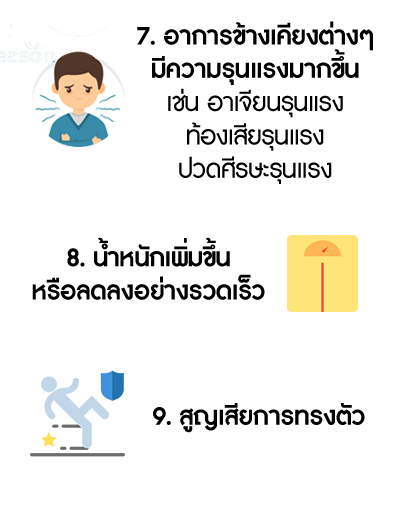
<style>
.page{position:relative;width:400px;height:507px;background:#ffffff}
.page>*{position:absolute;margin:0}
.t1{font:33.3px/33.3px "DBAdmanX";letter-spacing:-0.015em;color:#000000}
.t2{font:33.3px/33.3px "DBAdmanX-Bold";letter-spacing:-0.015em;color:#000000}
.t3{font:33.3px "DBAdmanX-Bold";letter-spacing:-0.015em;color:#000000}
</style>
<div class="page">
<p class="t1" style="left:137px;top:21px;width:236px;height:163px;text-align:center"><span class="t2">7. อาการข้างเคียงต่างๆ <br>มีความรุนแรงมากขึ้น <br></span>เช่น อาเจียนรุนแรง <br>ท้องเสียรุนแรง <br>ปวดศีรษะรุนแรง</p>
<p class="t2" style="left:32px;top:237px;width:233px;height:63px;text-align:center">8. น้ำหนักเพิ่มขึ้น<br>หรือลดลงอย่างรวดเร็ว</p>
<p class="t3" style="left:153px;top:403px;width:212px;height:30px">9. สูญเสียการทรงตัว</p>
</div>
